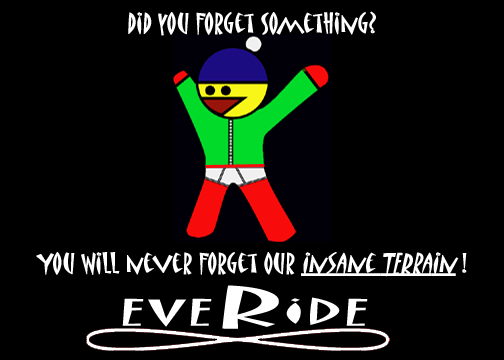
<style>
.page{position:relative;width:504px;height:360px;background:#000001}
.page>*{position:absolute;margin:0}
.t1{font:23.9px "MatisseITC-Regular";color:#ffffff;font-weight:bold}
.t2{font:23.9px "MatisseITC-Regular";color:#ffffff;font-weight:bold;font-style:italic;text-decoration:underline}
.t3{font:29.9px "MatisseITC-Regular";color:#ffffff;scale:3.16 1}
.t4{font:47.8px "MatisseITC-Regular";color:#ffffff;scale:3.16 1}
</style>
<div class="page">
<p class="t1" style="left:128px;top:11px;width:248px;height:25px">did you Forget Something?</p>
<p class="t1" style="left:36px;top:252px;width:431px;height:25px">You Will never Forget Our <span class="t2">insane TERrain </span>!</p>
<p class="t3" style="left:122px;top:285px;width:246px;height:44px">EVE<span class="t4">R</span>IDE</p>
</div>
